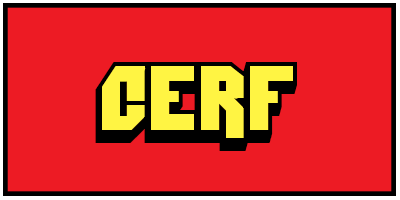
<style>
.page{position:relative;width:400px;height:200px;background:#ed1b24}
.page>*{position:absolute;margin:0}
.t1{font:91.7px "DimitriSwank";color:#000000}
</style>
<div class="page">
<p class="t1" style="left:95px;top:62px;width:202px;height:89px">Cerf</p>
</div>
